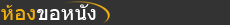
<style>
.page{position:relative;width:230px;height:25px;background:#333333}
.page>*{position:absolute;margin:0}
.t1{font:20.3px "Tahoma";color:#ffffff}
.t2{font:20.3px "Tahoma";color:#f1b00d}
</style>
<div class="page">
<p class="t1" style="left:1px;top:4px;width:95px;height:16px"><span class="t2">ห้อง</span>ขอหนัง</p>
</div>
